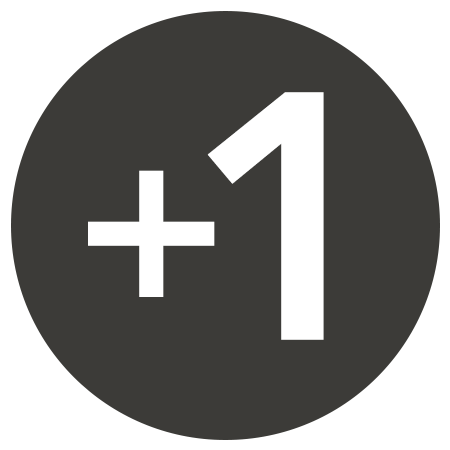
<style>
.page{position:relative;width:450px;height:450px;background:#3c3b38}
.page>*{position:absolute;margin:0}
.t1{font:349.2px "AvenirNext-DemiBold";letter-spacing:-0.05em;color:#ffffff}
.t2{font:232.5px "AvenirNext-DemiBold";letter-spacing:-0.05em;color:#ffffff}
</style>
<div class="page">
<p class="t1" style="left:207px;top:92px;width:117px;height:248px">1</p>
<p class="t2" style="left:88px;top:170px;width:127px;height:127px">+</p>
</div>
